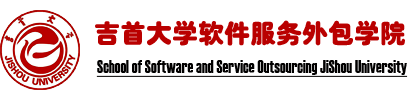
<style>
.page{position:relative;width:420px;height:100px;background:#ffffff}
.page>*{position:absolute;margin:0}
.t1{font:26px "JCaoCuYuan";color:#b90000}
.t2{font:18px "Haettenschweiler";color:#010000;text-decoration:underline;scale:0.9 1}
.t3{font:18px "Haettenschweiler";color:#010000;text-decoration:underline}
</style>
<div class="page">
<p class="t1" style="left:95px;top:20px;width:310px;height:26px">吉首大学软件服务外包学院</p>
<p class="t2" style="left:96px;top:60px;width:312px;height:17px"><span class="t3"><br></span>School of Software and Service Outsourcing JiShou University</p>
</div>
